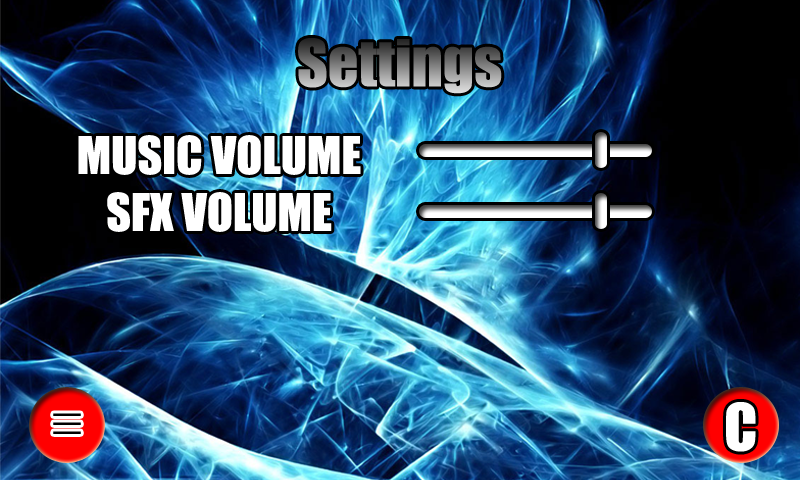
<style>
.page{position:relative;width:800px;height:480px}
.page>*{position:absolute;margin:0}
.t1{font:60px "Impact"}
.t2{font:48px "Impact";color:#ffffff;text-transform:uppercase}
.t3{font:48px/9px "Impact";letter-spacing:-0.08em;color:#010101;text-transform:uppercase}
.t4{font:60px "Impact";color:#ffffff}
</style>
<div class="page">
<p class="t1" style="left:298px;top:38px;width:204px;height:56px">Settings</p>
<p class="t2" style="left:78px;top:135px;width:283px;height:40px">Music Volume</p>
<p class="t2" style="left:107px;top:192px;width:225px;height:40px">SFX Volume</p>
<p class="t3" style="left:53px;top:413px;width:28px;height:21px;text-align:center">_<br>_<br>_</p>
<p class="t4" style="left:726px;top:402px;width:30px;height:50px">C</p>
</div>
